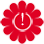
<style>
.page{position:relative;width:44px;height:44px;background:#ffffff}
.page>*{position:absolute;margin:0}
.t1{font:16.4px "MingLiU-ExtB";color:#ffffff}
</style>
<div class="page">
<p class="t1" style="left:21px;top:12px;width:3px;height:14px">!</p>
</div>
